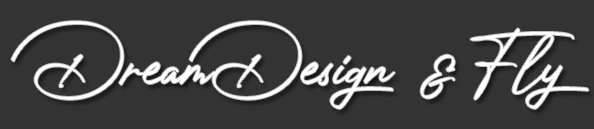
<style>
.page{position:relative;width:594px;height:129px;background:#333333}
.page>*{position:absolute;margin:0}
.t1{font:80px "PhotographSignature";color:#ffffff}
</style>
<div class="page">
<p class="t1" style="left:11px;top:21px;width:578px;height:88px">DreamDesign &amp;Fly</p>
</div>
